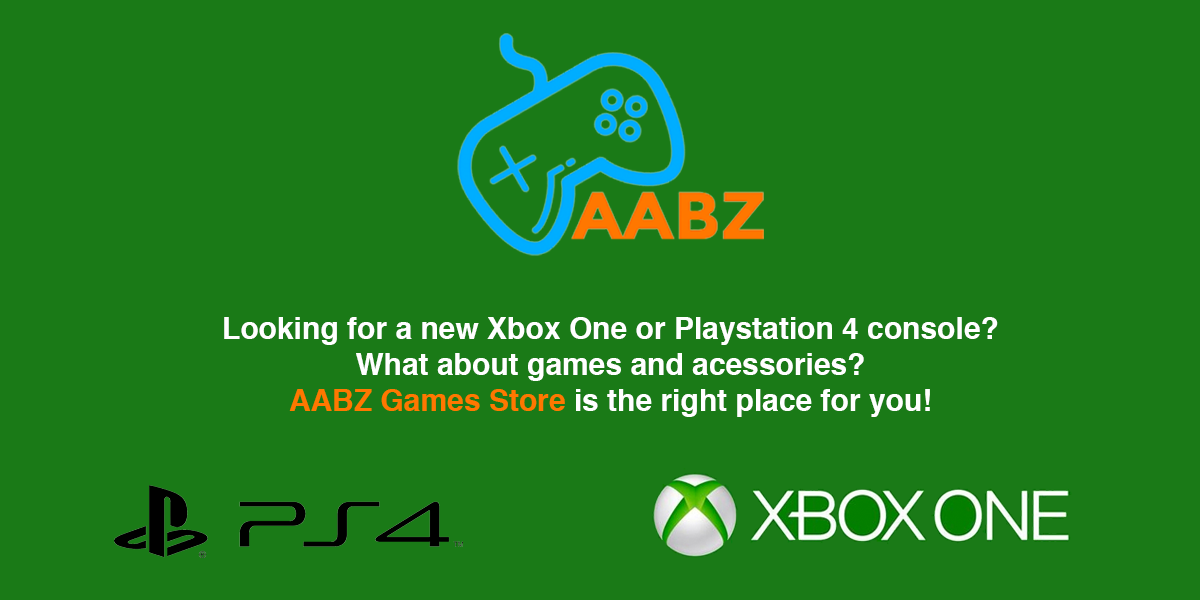
<style>
.page{position:relative;width:1200px;height:600px;background:#1a7a17}
.page>*{position:absolute;margin:0}
.t1{font:30px "Helvetica-Bold";color:#ffffff}
.t2{font:30px "Helvetica-Bold";color:#ff7700}
</style>
<div class="page">
<p class="t1" style="left:224px;top:317px;width:774px;height:100px;text-align:center">Looking for a new Xbox One or Playstation 4 console? <br>What about games and acessories? <br><span class="t2">AABZ Games Store</span> is the right place for you!</p>
</div>
